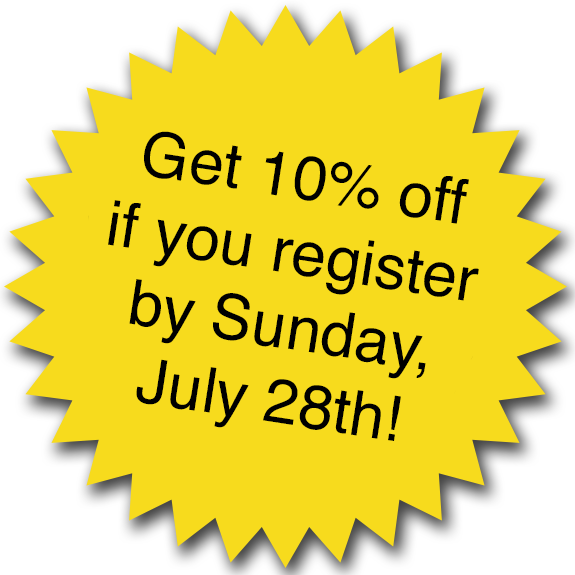
<style>
.page{position:relative;width:575px;height:575px;background:#f7db1d}
.page>*{position:absolute;margin:0}
.t1{font:62.5px "Helvetica";color:#000000}
</style>
<div class="page">
<p class="t1" style="left:108px;top:131px;width:371px;height:310px;text-align:center;rotate:9deg">Get 10% off<br>if you register<br>by Sunday,<br>July 28th!</p>
</div>
